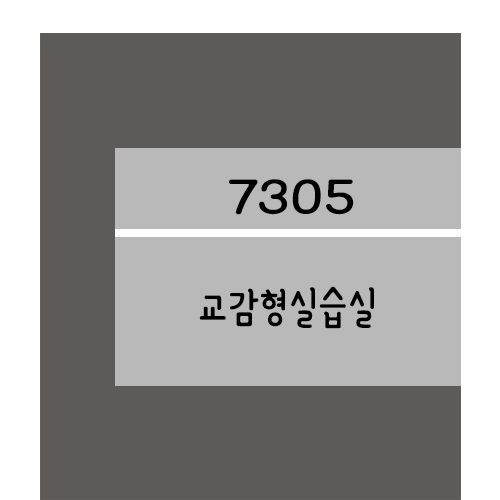
<style>
.page{position:relative;width:500px;height:500px;background:#5d5a5a}
.page>*{position:absolute;margin:0}
.t1{font:61.2px "YanoljaYacheR";color:#000000;scale:1.18 1}
.t2{font:48px "YanoljaYacheR";color:#000000}
</style>
<div class="page">
<p class="t1" style="left:229px;top:179px;width:125px;height:36px">7305</p>
<p class="t2" style="left:199px;top:286px;width:175px;height:43px">교감형실습실</p>
</div>
